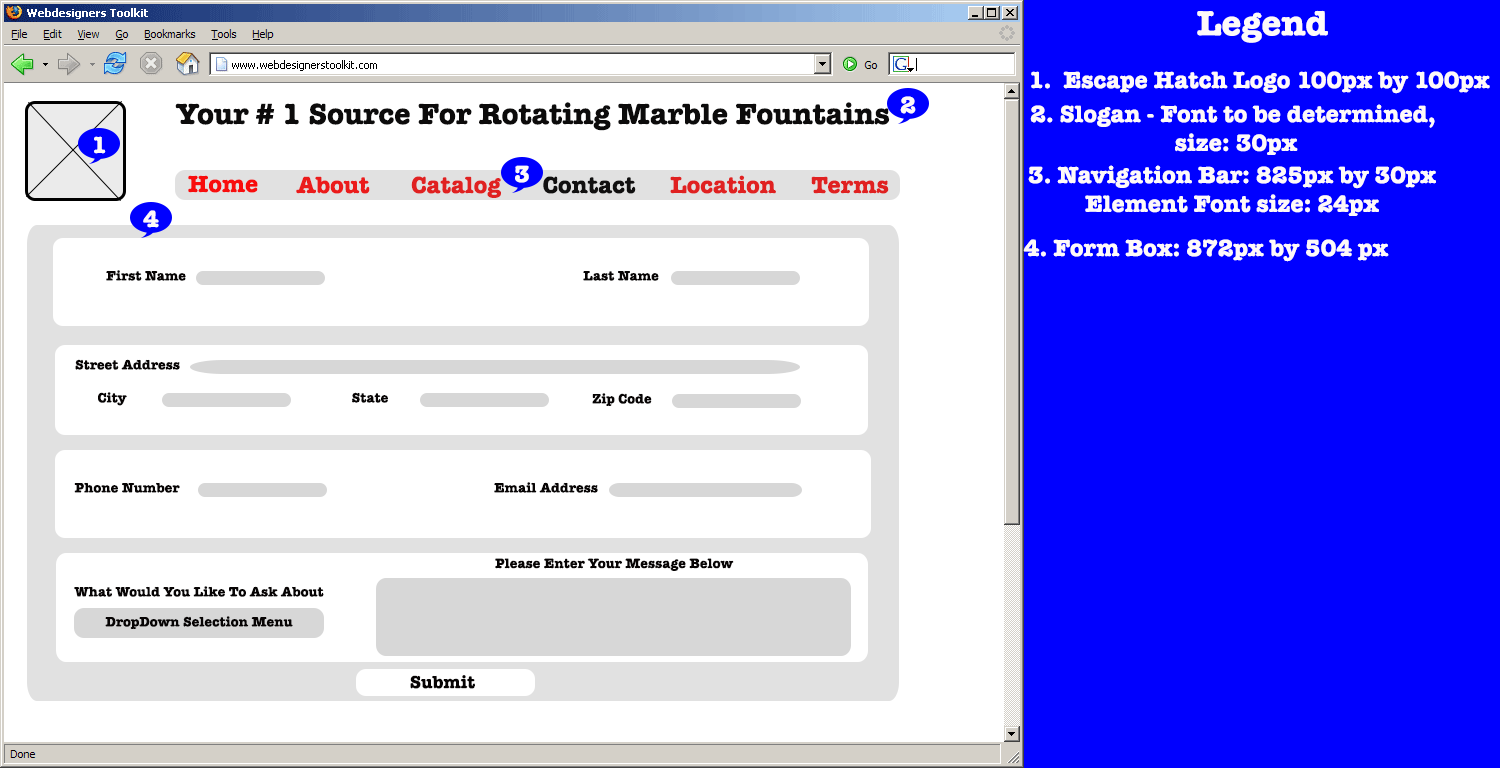
<style>
.page{position:relative;width:1500px;height:768px;background:#ffffff}
.page>*{position:absolute;margin:0}
.t1{font:36px "AmericanTypewriter-Bold";color:#fef9f9}
.t2{font:24px "AmericanTypewriter-Bold";color:#fef9f9}
.t3{font:30px "AmericanTypewriter-Bold";color:#0c0b0b}
.t4{font:24px "AmericanTypewriter-Bold";color:#f80d0d}
.t5{font:24px "AmericanTypewriter-Bold";color:#eb1b1b}
.t6{font:24px "AmericanTypewriter-Bold";color:#e02121}
.t7{font:24px "AmericanTypewriter-Bold";color:#111010}
.t8{font:14px "AmericanTypewriter-Bold";color:#070404}
.t9{font:18px "AmericanTypewriter-Bold";color:#070404}
</style>
<div class="page">
<p class="t1" style="left:1197px;top:10px;width:131px;height:33px">Legend</p>
<p class="t2" style="left:1031px;top:71px;width:459px;height:23px">1.  Escape Hatch Logo 100px by 100px</p>
<p class="t3" style="left:175px;top:102px;width:715px;height:29px">Your # 1 Source For Rotating Marble Fountains</p>
<p class="t2" style="left:900px;top:96px;width:16px;height:18px">2</p>
<p class="t2" style="left:1030px;top:104px;width:405px;height:51px;text-align:center">2. Slogan - Font to be determined, <br>size: 30px</p>
<p class="t2" style="left:94px;top:136px;width:12px;height:18px">1</p>
<p class="t2" style="left:515px;top:165px;width:14px;height:18px">3</p>
<p class="t2" style="left:1028px;top:165px;width:408px;height:51px;text-align:center">3. Navigation Bar: 825px by 30px<br>Element Font size: 24px</p>
<p class="t4" style="left:188px;top:175px;width:70px;height:18px">Home</p>
<p class="t5" style="left:296px;top:176px;width:74px;height:18px">About</p>
<p class="t6" style="left:411px;top:176px;width:90px;height:22px">Catalog</p>
<p class="t7" style="left:543px;top:176px;width:93px;height:18px">Contact</p>
<p class="t6" style="left:670px;top:175px;width:106px;height:19px">Location</p>
<p class="t6" style="left:811px;top:176px;width:78px;height:18px">Terms</p>
<p class="t2" style="left:143px;top:210px;width:16px;height:18px">4</p>
<p class="t2" style="left:1023px;top:239px;width:366px;height:23px">4. Form Box: 872px by 504 px</p>
<p class="t8" style="left:106px;top:270px;width:80px;height:11px">First Name</p>
<p class="t8" style="left:583px;top:271px;width:76px;height:10px">Last Name</p>
<p class="t8" style="left:75px;top:359px;width:105px;height:11px">Street Address</p>
<p class="t8" style="left:98px;top:392px;width:29px;height:14px">City</p>
<p class="t8" style="left:352px;top:392px;width:36px;height:11px">State</p>
<p class="t8" style="left:592px;top:393px;width:60px;height:13px">Zip Code</p>
<p class="t8" style="left:74px;top:482px;width:106px;height:11px">Phone Number</p>
<p class="t8" style="left:494px;top:482px;width:104px;height:11px">Email Address</p>
<p class="t8" style="left:495px;top:558px;width:239px;height:13px">Please Enter Your Message Below</p>
<p class="t8" style="left:74px;top:586px;width:250px;height:11px">What Would You Like To Ask About</p>
<p class="t8" style="left:105px;top:616px;width:188px;height:13px">DropDown Selection Menu</p>
<p class="t9" style="left:410px;top:675px;width:65px;height:14px">Submit</p>
</div>
